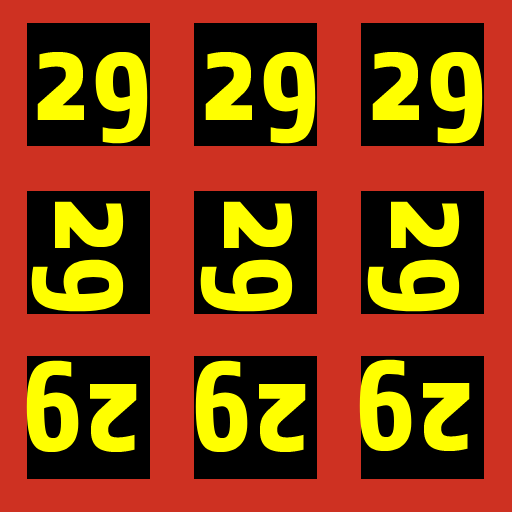
<style>
.page{position:relative;width:512px;height:512px;background:#ce3122}
.page>*{position:absolute;margin:0}
.t1{font:130px "Share-BoldOSF";color:#ffff00}
</style>
<div class="page">
<p class="t1" style="left:37px;top:51px;width:111px;height:93px">29</p>
<p class="t1" style="left:205px;top:51px;width:111px;height:93px">29</p>
<p class="t1" style="left:372px;top:51px;width:111px;height:93px">29</p>
<p class="t1" style="left:31px;top:201px;width:93px;height:111px;rotate:90deg">29</p>
<p class="t1" style="left:200px;top:201px;width:93px;height:111px;rotate:90deg">29</p>
<p class="t1" style="left:367px;top:201px;width:93px;height:111px;rotate:90deg">29</p>
<p class="t1" style="left:26px;top:360px;width:111px;height:93px;rotate:-180deg">29</p>
<p class="t1" style="left:195px;top:360px;width:111px;height:93px;rotate:-180deg">29</p>
<p class="t1" style="left:359px;top:359px;width:111px;height:93px;rotate:-180deg">29</p>
</div>
